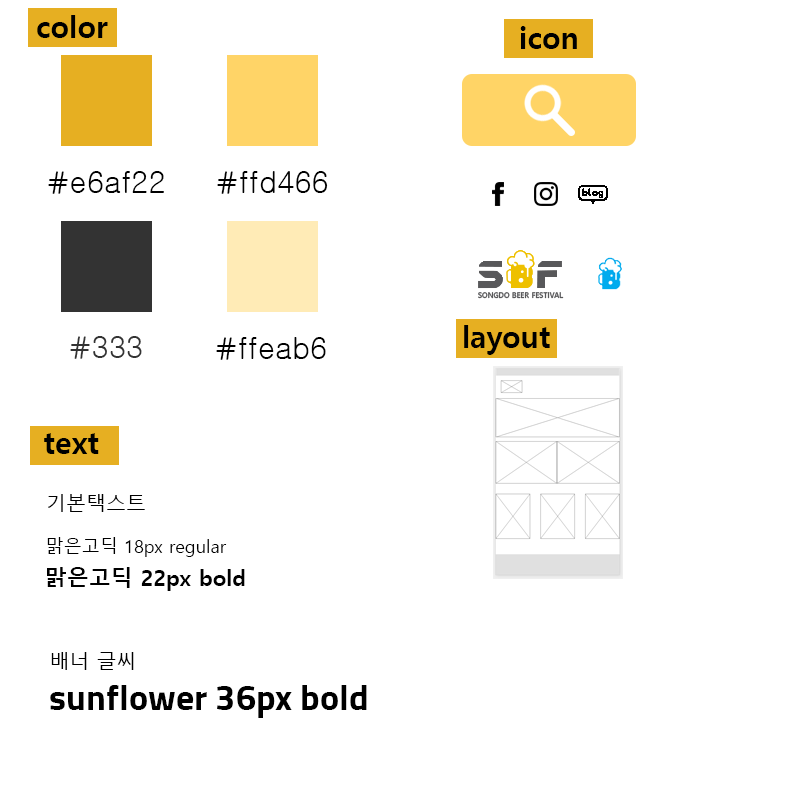
<style>
.page{position:relative;width:800px;height:800px;background:#ffffff}
.page>*{position:absolute;margin:0}
.t1{font:30px "MalgunGothicBold";color:#000000}
.t2{font:30px "Gulim";color:#000000}
.t3{font:30px "Gulim";color:#333333}
.t4{font:20px "MalgunGothic";color:#000000}
.t5{font:18px "MalgunGothic";color:#000000}
.t6{font:22px "MalgunGothicBold";color:#000000}
.t7{font:36px "Sunflower-Bold";color:#000000}
</style>
<div class="page">
<p class="t1" style="left:37px;top:15px;width:71px;height:23px">color</p>
<p class="t1" style="left:520px;top:26px;width:57px;height:23px">icon</p>
<p class="t2" style="left:48px;top:171px;width:116px;height:23px">#e6af22</p>
<p class="t2" style="left:217px;top:171px;width:111px;height:23px">#ffd466</p>
<p class="t1" style="left:464px;top:325px;width:86px;height:30px">layout</p>
<p class="t3" style="left:70px;top:336px;width:72px;height:23px">#333</p>
<p class="t2" style="left:216px;top:337px;width:110px;height:23px">#ffeab6</p>
<p class="t1" style="left:44px;top:433px;width:55px;height:21px">text</p>
<p class="t4" style="left:48px;top:494px;width:97px;height:18px">기본택스트</p>
<p class="t5" style="left:47px;top:537px;width:180px;height:20px">맑은고딕 18px regular</p>
<p class="t6" style="left:47px;top:567px;width:198px;height:24px">맑은고딕 22px bold</p>
<p class="t4" style="left:51px;top:652px;width:83px;height:18px">배너 글씨</p>
<p class="t7" style="left:50px;top:685px;width:317px;height:33px">sunflower 36px bold</p>
</div>
